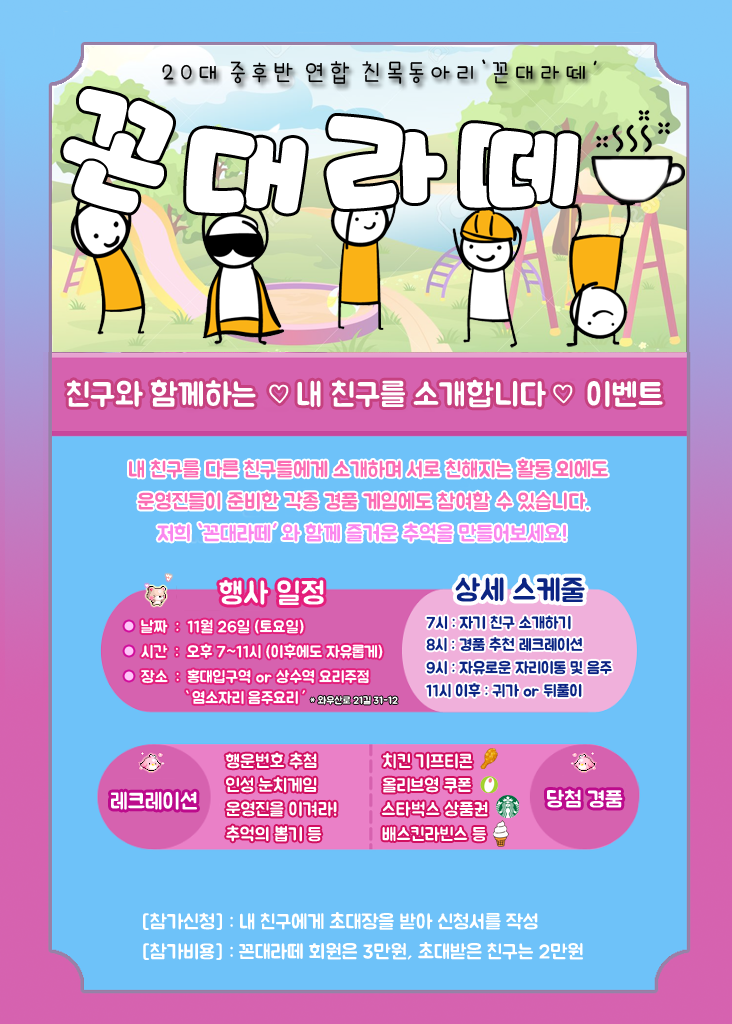
<style>
.page{position:relative;width:732px;height:1024px;background:#6ec2f9}
.page>*{position:absolute;margin:0}
.t1{font:24px "icTTHayanbunpilL";color:#000000}
.t2{font:18px "Pix_BMJUAOTF";color:#000000}
.t3{font:120px "KoreanPODG-R";color:#ffffff}
.t4{font:32px "Pix_BMJUAOTF";color:#ffffff}
.t5{font:26px "Pix_BMJUAOTF";color:#ffffff}
.t6{font:21px "Pix_BMJUAOTF";color:#fb6db4}
.t7{font:21px "Pix_BMJUAOTF";color:#fa87ee}
.t8{font:30px "Pix_BMJUAOTF";color:#ffffff}
.t9{font:30px "Pix_BMJUAOTF";color:#0b2483}
.t10{font:16px "Pix_BMJUAOTF";color:#0b2483}
.t11{font:70px "Pix_BMJUAOTF";color:#ffc5f9}
.t12{font:16px "Pix_BMJUAOTF";color:#ffffff}
.t13{font:10px "Pix_BMJUAOTF";color:#ffffff}
.t14{font:18px "Pix_BMJUAOTF";color:#ffffff}
.t15{font:22px "Pix_BMJUAOTF";color:#ffffff}
.t16{font:20px "Pix_BMJUAOTF";color:#ffffff}
</style>
<div class="page">
<p class="t1" style="left:162px;top:61px;width:423px;height:23px">2 0 대  중 후 반  연 합  친 목 동 아 리   꼰 대 라 떼</p>
<p class="t2" style="left:482px;top:59px;width:4px;height:5px;rotate:6deg">`</p>
<p class="t2" style="left:593px;top:60px;width:4px;height:6px;rotate:173deg">`</p>
<p class="t3" style="left:63px;top:89px;width:110px;height:124px;rotate:20deg">꼰</p>
<p class="t3" style="left:326px;top:116px;width:119px;height:93px">라</p>
<p class="t3" style="left:460px;top:123px;width:119px;height:85px;rotate:3deg">떼</p>
<p class="t3" style="left:186px;top:128px;width:120px;height:86px;rotate:5deg">대</p>
<p class="t4" style="left:67px;top:379px;width:596px;height:29px">친구와 함께하는     내 친구를 소개합니다     이벤트</p>
<p class="t5" style="left:269px;top:384px;width:20px;height:20px">♡</p>
<p class="t5" style="left:553px;top:384px;width:20px;height:20px">♡</p>
<p class="t6" style="left:129px;top:459px;width:479px;height:19px">내 친구를 다른 친구들에게 소개하며 서로 친해지는 활동 외에도</p>
<p class="t6" style="left:137px;top:491px;width:452px;height:20px">운영진들이 준비한 각종 경품 게임에도 참여할 수 있습니다.</p>
<p class="t7" style="left:157px;top:523px;width:409px;height:19px">저희 `꼰대라떼  와 함께 즐거운 추억을 만들어보세요!</p>
<p class="t7" style="left:272px;top:523px;width:5px;height:5px;rotate:180deg">`</p>
<p class="t8" style="left:219px;top:580px;width:105px;height:25px">행사 일정</p>
<p class="t9" style="left:455px;top:577px;width:130px;height:25px">상세 스케줄</p>
<p class="t10" style="left:426px;top:615px;width:145px;height:15px">7시 : 자기 친구 소개하기</p>
<p class="t11" style="left:124px;top:621px;width:10px;height:10px">.</p>
<p class="t12" style="left:141px;top:619px;width:163px;height:15px">날짜  :  11월 26일 (토요일)</p>
<p class="t10" style="left:426px;top:637px;width:157px;height:15px">8시 : 경품 추천 레크레이션</p>
<p class="t11" style="left:124px;top:646px;width:10px;height:10px">.</p>
<p class="t12" style="left:141px;top:644px;width:242px;height:15px">시간  :  오후 7~11시 (이후에도 자유롭게)</p>
<p class="t10" style="left:426px;top:660px;width:186px;height:15px">9시 : 자유로운 자리이동 및 음주</p>
<p class="t11" style="left:124px;top:671px;width:10px;height:10px">.</p>
<p class="t12" style="left:141px;top:669px;width:228px;height:15px">장소  :  홍대입구역 or 상수역 요리주점</p>
<p class="t10" style="left:426px;top:683px;width:156px;height:15px">11시 이후 : 귀가 or 뒤풀이</p>
<p class="t12" style="left:186px;top:690px;width:3px;height:4px;rotate:-171deg">,</p>
<p class="t12" style="left:192px;top:690px;width:106px;height:15px">염소자리 음주요리</p>
<p class="t12" style="left:302px;top:690px;width:3px;height:4px;rotate:-9deg">,</p>
<p class="t13" style="left:310px;top:695px;width:88px;height:10px">* 와우산로 21길 31-12</p>
<p class="t14" style="left:225px;top:752px;width:92px;height:17px">행운번호 추첨</p>
<p class="t14" style="left:383px;top:753px;width:90px;height:16px">치킨 기프티콘</p>
<p class="t14" style="left:226px;top:777px;width:91px;height:16px">인성 눈치게임</p>
<p class="t14" style="left:382px;top:777px;width:89px;height:16px">올리브영 쿠폰</p>
<p class="t15" style="left:111px;top:791px;width:86px;height:19px">레크레이션</p>
<p class="t15" style="left:547px;top:789px;width:76px;height:19px">당첨 경품</p>
<p class="t14" style="left:226px;top:801px;width:111px;height:16px">운영진을 이겨라!</p>
<p class="t14" style="left:381px;top:801px;width:107px;height:16px">스타벅스 상품권</p>
<p class="t14" style="left:226px;top:825px;width:96px;height:17px">추억의 뽑기 등</p>
<p class="t14" style="left:382px;top:826px;width:104px;height:16px">배스킨라빈스 등</p>
<p class="t16" style="left:143px;top:912px;width:395px;height:18px">[참가신청] : 내 친구에게 초대장을 받아 신청서를 작성</p>
<p class="t16" style="left:143px;top:942px;width:440px;height:18px">[참가비용] : 꼰대라떼 회원은 3만원, 초대받은 친구는 2만원</p>
</div>
